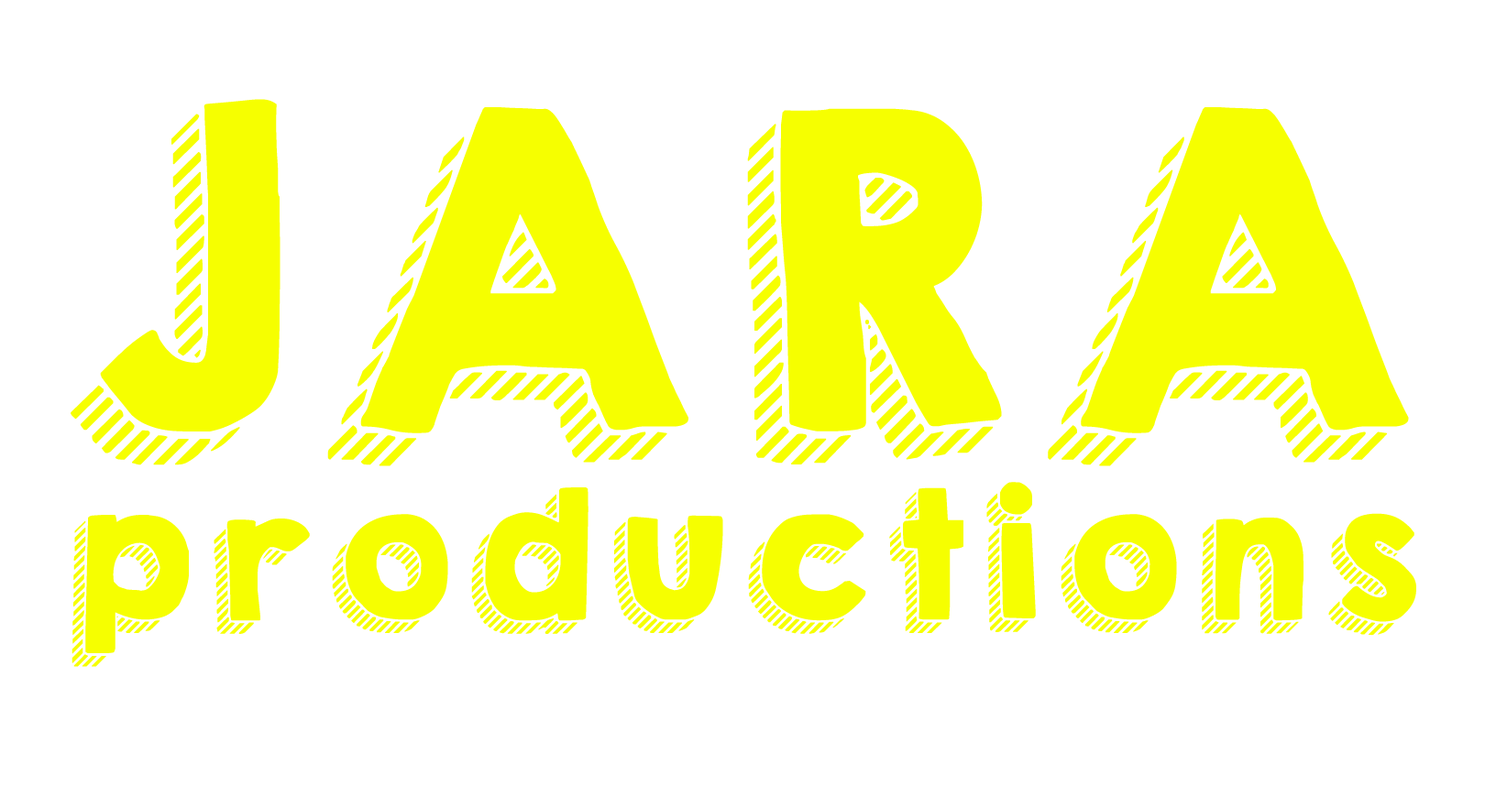
<style>
.page{position:relative;width:1496px;height:797px;background:#ffffff}
.page>*{position:absolute;margin:0}
.t1{font:160.6px "KGHAPPY";letter-spacing:0.06em;color:#f6ff00;font-weight:bold}
.t2{font:394.3px "KGHAPPY";letter-spacing:0.06em;color:#f6ff00;font-weight:bold}
</style>
<div class="page">
<p class="t1" style="left:71px;top:99px;width:1345px;height:568px;text-align:center"><span class="t2">JARA<br></span>productions</p>
</div>
